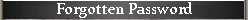
<style>
.page{position:relative;width:248px;height:20px}
.page>*{position:absolute;margin:0}
.t1{font:16px "Constantia";color:#ffffff}
</style>
<div class="page">
<p class="t1" style="left:57px;top:2px;width:135px;height:16px">Forgotten Password</p>
</div>
